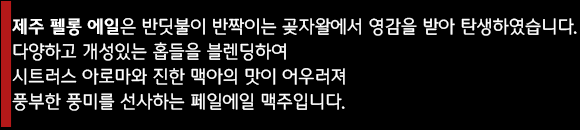
<style>
.page{position:relative;width:580px;height:130px;background:#000000}
.page>*{position:absolute;margin:0}
.t1{font:18px/25px "MICEGothic";color:#ffffff}
.t2{font:18px/25px "MICEGothicBold";color:#ffffff}
</style>
<div class="page">
<p class="t1" style="left:12px;top:17px;width:565px;height:94px"><span class="t2">제주 펠롱 에일</span>은 반딧불이 반짝이는 곶자왈에서 영감을 받아 탄생하였습니다.<br>다양하고 개성있는 홉들을 블렌딩하여<br>시트러스 아로마와 진한 맥아의 맛이 어우러져<br>풍부한 풍미를 선사하는 페일에일 맥주입니다.</p>
</div>
